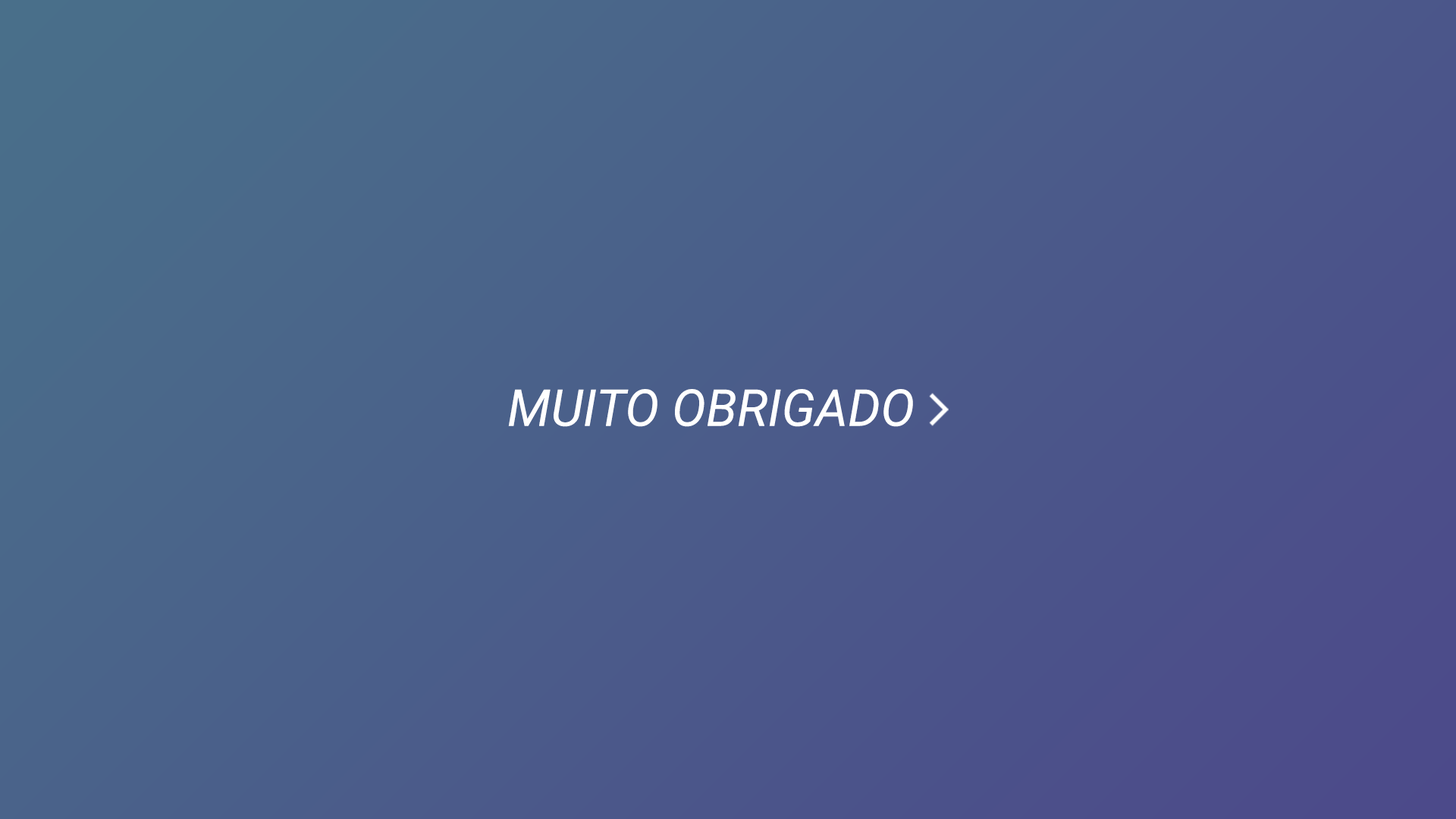
<style>
.page{position:relative;width:1456px;height:819px}
.page>*{position:absolute;margin:0}
.t1{font:50.9px "Roboto-Italic";color:#ffffff}
</style>
<div class="page">
<p class="t1" style="left:508px;top:389px;width:405px;height:38px">MUITO OBRIGADO</p>
</div>
